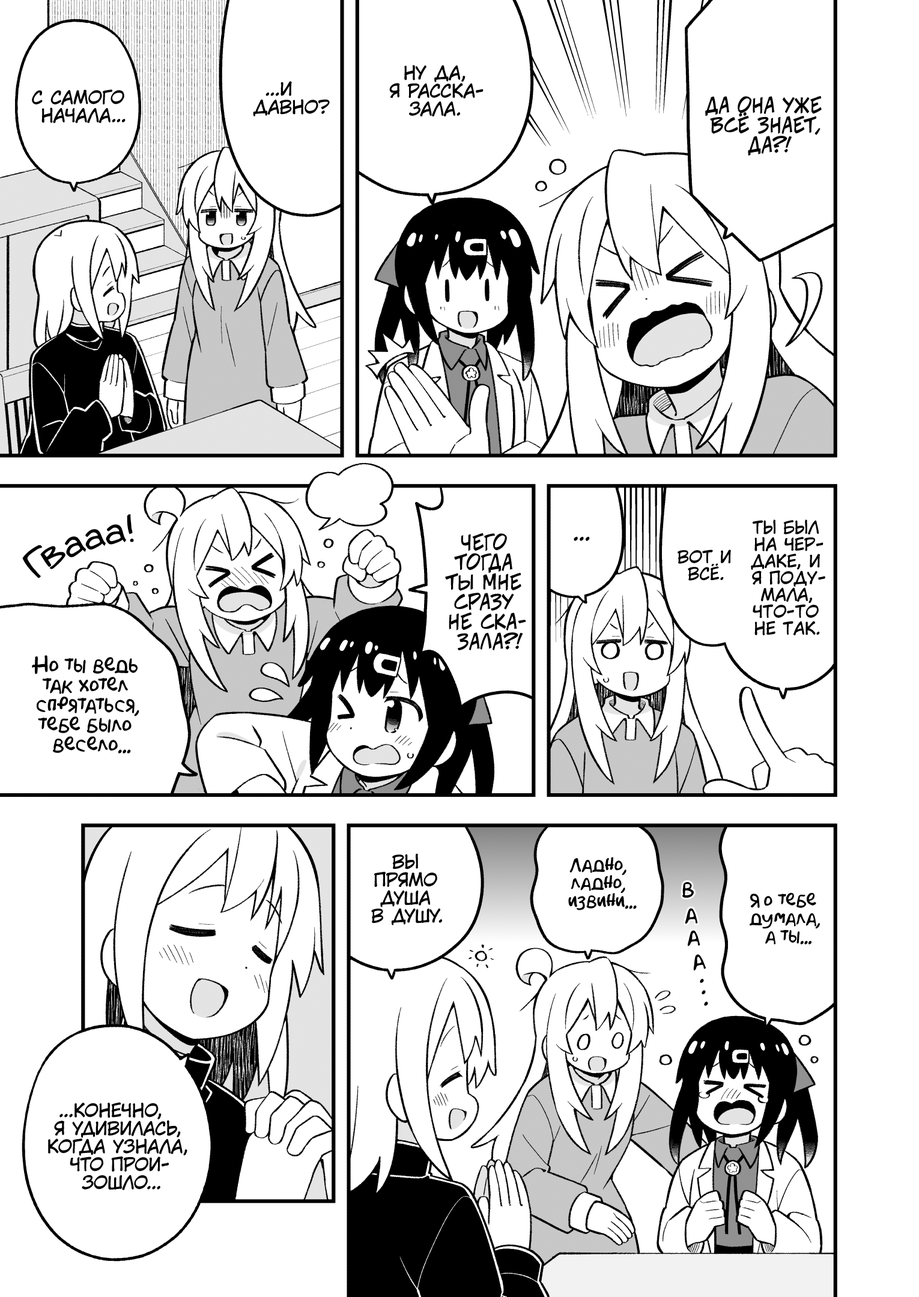
<style>
.page{position:relative;width:919px;height:1297px;background:#ffffff}
.page>*{position:absolute;margin:0}
.t1{font:18px "KuraiVoice2";color:#000000;text-transform:uppercase}
.t2{font:19.8px "v_CCJeffCampbell";color:#000000;text-transform:uppercase}
.t3{font:36px "v_Augie";color:#000000}
.t4{font:16.8px "KuraiVoice2";color:#000000;text-transform:uppercase}
.t5{font:21.6px "KuraiVoice2";color:#000000;text-transform:uppercase}
.t6{font:19.8px "AkbarPlain";color:#000000}
.t7{font:18px "AkbarPlain";color:#000000}
.t8{font:21.6px "AkbarPlain";color:#000000}
</style>
<div class="page">
<p class="t1" style="left:389px;top:65px;width:95px;height:52px;text-align:center">Ну да,<br>я расска-<br>зала.</p>
<p class="t1" style="left:32px;top:90px;width:94px;height:33px;text-align:center">С самого<br>начала...</p>
<p class="t1" style="left:253px;top:81px;width:77px;height:36px;text-align:center">...И<br>давно?</p>
<p class="t2" style="left:705px;top:96px;width:117px;height:60px;text-align:center">Да она уже<br>всё знает,<br>да?!</p>
<p class="t3" style="left:22px;top:514px;width:112px;height:64px;rotate:-22deg">Гвааа!</p>
<p class="t4" style="left:751px;top:520px;width:74px;height:116px;text-align:center">ты был<br>на чер-<br>даке, и<br>я поду-<br>мала,<br>что-то<br>не так.</p>
<p class="t2" style="left:445px;top:533px;width:81px;height:118px;text-align:center">Чего<br>тогда<br>ты мне<br>сразу<br>не ска-<br>зала?!</p>
<p class="t5" style="left:574px;top:537px;width:16px;height:4px">...</p>
<p class="t4" style="left:678px;top:550px;width:53px;height:31px;text-align:center">Вот и<br>всё.</p>
<p class="t6" style="left:32px;top:655px;width:107px;height:99px;text-align:center">Но ты ведь<br>так хотел<br>спрятаться,<br>тебе было<br>весело...</p>
<p class="t1" style="left:371px;top:854px;width:71px;height:72px;text-align:center">Вы<br>прямо<br>душа<br>в душу.</p>
<p class="t7" style="left:568px;top:857px;width:69px;height:54px;text-align:center">Ладно,<br>ладно,<br>извини...</p>
<p class="t8" style="left:682px;top:882px;width:12px;height:16px;rotate:-8deg">в</p>
<p class="t7" style="left:750px;top:893px;width:70px;height:52px;text-align:center">Я о тебе<br>думала,<br>а ты...</p>
<p class="t8" style="left:685px;top:908px;width:13px;height:16px;rotate:-6deg">а</p>
<p class="t8" style="left:688px;top:930px;width:12px;height:17px;rotate:-7deg">а</p>
<p class="t8" style="left:693px;top:954px;width:13px;height:17px;rotate:-13deg">а</p>
<p class="t8" style="left:700px;top:979px;width:4px;height:4px">.</p>
<p class="t8" style="left:702px;top:991px;width:4px;height:4px">.</p>
<p class="t8" style="left:704px;top:1002px;width:4px;height:4px">.</p>
<p class="t1" style="left:48px;top:1103px;width:139px;height:88px;text-align:center">...Конечно,<br>я удивилась,<br>когда узнала,<br>что прои-<br>зошло...</p>
</div>
